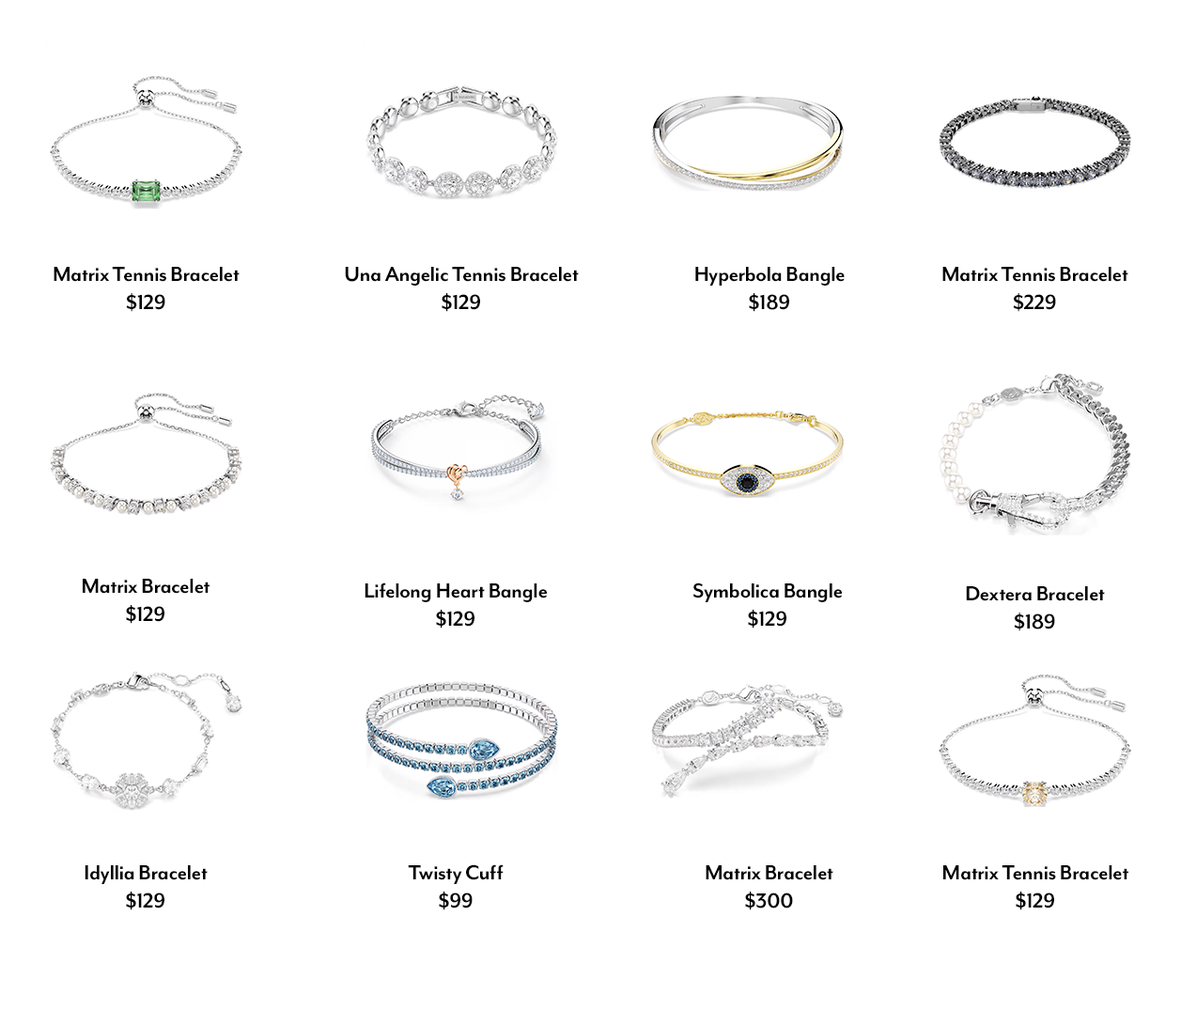
<style>
.page{position:relative;width:1181px;height:1009px;background:#ffffff}
.page>*{position:absolute;margin:0}
.t1{font:23.5px "MrEavesModOT-Bold";letter-spacing:-0.02em;color:#000000}
</style>
<div class="page">
<p class="t1" style="left:54px;top:267px;width:186px;height:45px;text-align:center">Matrix Tennis Bracelet<br>$129</p>
<p class="t1" style="left:345px;top:267px;width:234px;height:45px;text-align:center">Una Angelic Tennis Bracelet<br>$129</p>
<p class="t1" style="left:695px;top:267px;width:150px;height:45px;text-align:center">Hyperbola Bangle<br>$189</p>
<p class="t1" style="left:943px;top:267px;width:186px;height:45px;text-align:center">Matrix Tennis Bracelet<br>$229</p>
<p class="t1" style="left:83px;top:579px;width:127px;height:45px;text-align:center">Matrix Bracelet<br>$129</p>
<p class="t1" style="left:365px;top:583px;width:182px;height:46px;text-align:center">Lifelong Heart Bangle<br>$129</p>
<p class="t1" style="left:693px;top:583px;width:149px;height:46px;text-align:center">Symbolica Bangle<br>$129</p>
<p class="t1" style="left:966px;top:586px;width:139px;height:46px;text-align:center">Dextera Bracelet<br>$189</p>
<p class="t1" style="left:85px;top:866px;width:123px;height:45px;text-align:center">Idyllia Bracelet<br>$129</p>
<p class="t1" style="left:408px;top:865px;width:96px;height:46px;text-align:center">Twisty Cuff<br>$99</p>
<p class="t1" style="left:706px;top:866px;width:128px;height:45px;text-align:center">Matrix Bracelet<br>$300</p>
<p class="t1" style="left:944px;top:866px;width:185px;height:45px;text-align:center">Matrix Tennis Bracelet<br>$129</p>
</div>
